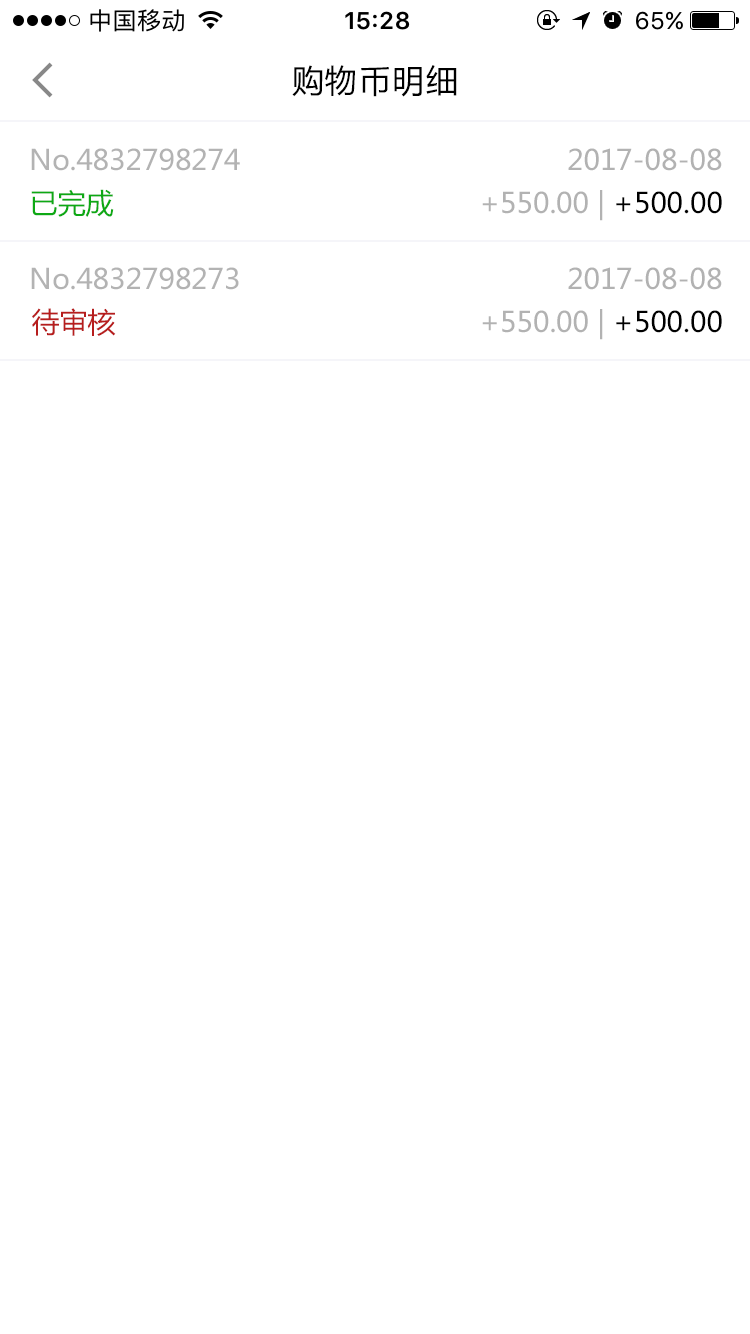
<style>
.page{position:relative;width:750px;height:1334px;background:#ffffff}
.page>*{position:absolute;margin:0}
.t1{font:32px "MicrosoftYaHei";letter-spacing:0.05em;color:#000000}
.t2{font:28px "MicrosoftYaHei";color:#b3b3b3}
.t3{font:28px "MicrosoftYaHei";color:#b1b1b1}
.t4{font:28px "MicrosoftYaHei";color:#0da914}
.t5{font:28px "MicrosoftYaHei";color:#b2b2b2}
.t6{font:28px "MicrosoftYaHei";color:#000000}
.t7{font:28px "MicrosoftYaHei";color:#b71d1d}
</style>
<div class="page">
<p class="t1" style="left:292px;top:65px;width:165px;height:32px">购物币明细</p>
<p class="t2" style="left:31px;top:148px;width:209px;height:23px">No.4832798274</p>
<p class="t3" style="left:568px;top:148px;width:154px;height:23px">2017-08-08</p>
<p class="t4" style="left:31px;top:189px;width:83px;height:28px">已完成</p>
<p class="t5" style="left:482px;top:190px;width:240px;height:31px">+550.00 | <span class="t6">+500.00</span></p>
<p class="t2" style="left:31px;top:267px;width:208px;height:23px">No.4832798273</p>
<p class="t3" style="left:568px;top:267px;width:154px;height:23px">2017-08-08</p>
<p class="t7" style="left:32px;top:308px;width:84px;height:28px">待审核</p>
<p class="t5" style="left:482px;top:309px;width:240px;height:31px">+550.00 | <span class="t6">+500.00</span></p>
</div>
